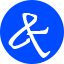
<style>
.page{position:relative;width:64px;height:64px;background:#004bff}
.page>*{position:absolute;margin:0}
.t1{font:61px "Pristina-Regular";color:#ffffff}
</style>
<div class="page">
<p class="t1" style="left:8px;top:13px;width:43px;height:45px">&amp;</p>
</div>
